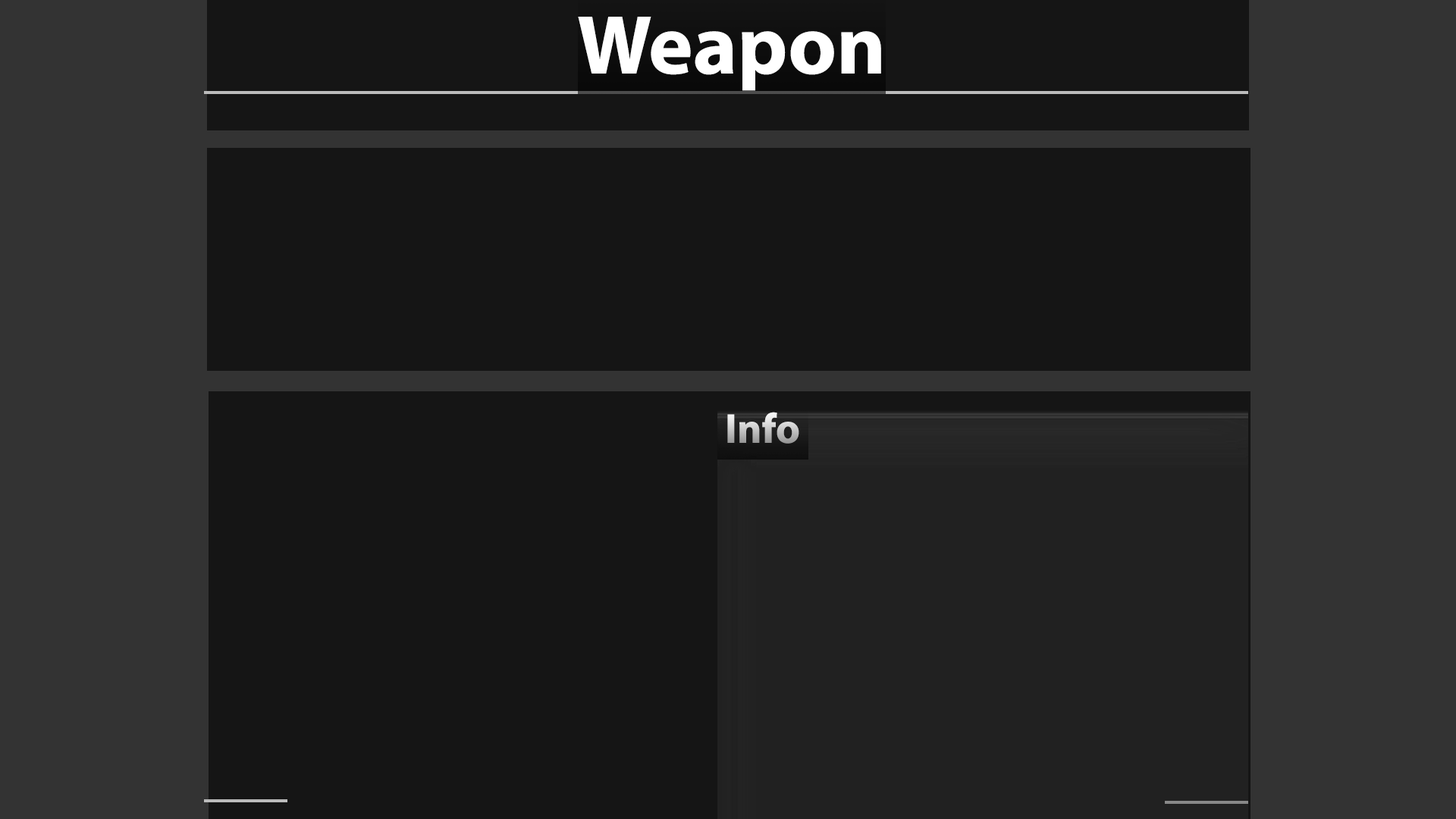
<style>
.page{position:relative;width:1456px;height:819px;background:#151515}
.page>*{position:absolute;margin:0}
.t1{font:84.3px "MyriadPro-Bold";color:#ffffff}
.t2{font:42.1px "MyriadPro-Bold"}
</style>
<div class="page">
<p class="t1" style="left:578px;top:17px;width:303px;height:74px">Weapon</p>
<p class="t2" style="left:727px;top:412px;width:72px;height:32px">Info</p>
</div>
